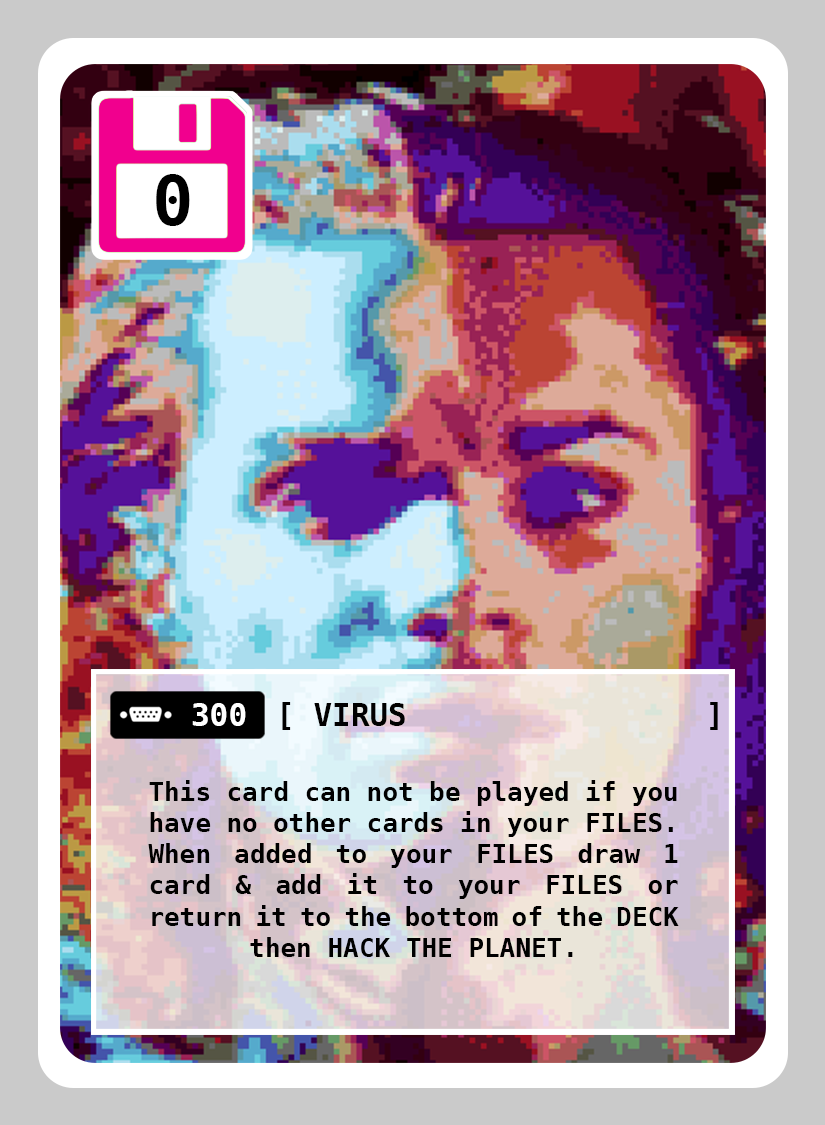
<style>
.page{position:relative;width:825px;height:1125px}
.page>*{position:absolute;margin:0}
.t1{font:69px "DejaVuSansMono-Bold";color:#000000}
.t2{font:31px "DejaVuSansMono-Bold";color:#000000}
.t3{font:31px "DejaVuSansMono-Bold";color:#ffffff}
.t4{font:26px "DejaVuSansMono-Bold";color:#000000}
</style>
<div class="page">
<p class="t1" style="left:156px;top:174px;width:34px;height:52px">0</p>
<p class="t2" style="left:282px;top:702px;width:436px;height:28px">[                      ]</p>
<p class="t3" style="left:192px;top:703px;width:54px;height:23px">300</p>
<p class="t2" style="left:314px;top:703px;width:91px;height:23px">VIRUS</p>
<p class="t4" style="left:148px;top:780px;width:531px;height:177px;text-align:justify">This card can not be played if you have no other cards in your FILES. When added to your FILES draw 1 card &amp; add it to your FILES or return it to the bottom of the DECK then HACK THE PLANET.</p>
</div>
